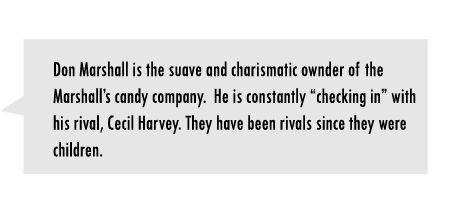
<style>
.page{position:relative;width:449px;height:216px;background:#e6e6e6}
.page>*{position:absolute;margin:0}
.t1{font:22.3px "TwCenMT-Condensed";color:#000000;scale:0.88 1}
</style>
<div class="page">
<p class="t1" style="left:53px;top:61px;width:363px;height:96px">Don Marshall is the suave and charismatic ownder of the Marshall’s candy company.  He is constantly “checking in” with his rival, Cecil Harvey. They have been rivals since they were children.</p>
</div>
